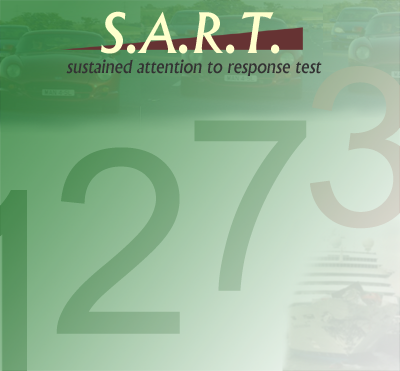
<style>
.page{position:relative;width:400px;height:371px}
.page>*{position:absolute;margin:0}
.t1{font:53.3px "AlbertusMedium-Italic";color:#ffffcc}
.t2{font:17.8px "AlbertusMedium-Italic";color:#333333}
.t3{font:240.4px "ArialMT";color:#92b795}
.t4{font:258.9px "ArialMT"}
</style>
<div class="page">
<p class="t1" style="left:101px;top:11px;width:179px;height:43px">S.A.R.T.</p>
<p class="t2" style="left:66px;top:59px;width:256px;height:17px">sustained attention to response test</p>
<p class="t3" style="left:194px;top:120px;width:113px;height:171px">7</p>
<p class="t4" style="left:56px;top:147px;width:124px;height:187px">2</p>
</div>
